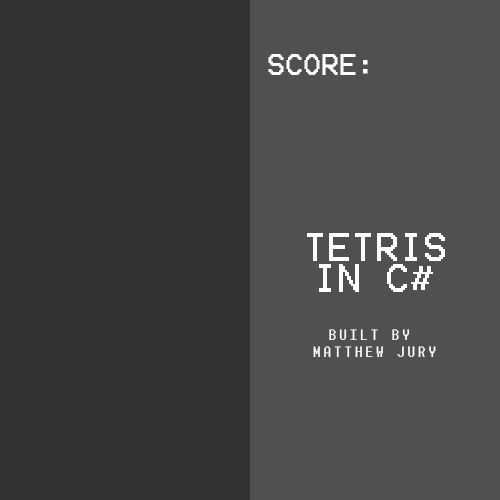
<style>
.page{position:relative;width:500px;height:500px;background:#333333}
.page>*{position:absolute;margin:0}
.t1{font:24px "Terminal";color:#ffffff}
.t2{font:32px "Terminal";color:#ffffff}
.t3{font:14px "Terminal";color:#ffffff}
</style>
<div class="page">
<p class="t1" style="left:268px;top:54px;width:100px;height:21px">SCORE:</p>
<p class="t2" style="left:307px;top:233px;width:138px;height:28px">TETRIS</p>
<p class="t2" style="left:319px;top:264px;width:114px;height:28px">IN C#</p>
<p class="t3" style="left:313px;top:329px;width:123px;height:28px;text-align:center">BUILT BY <br>MATTHEW JURY</p>
</div>
